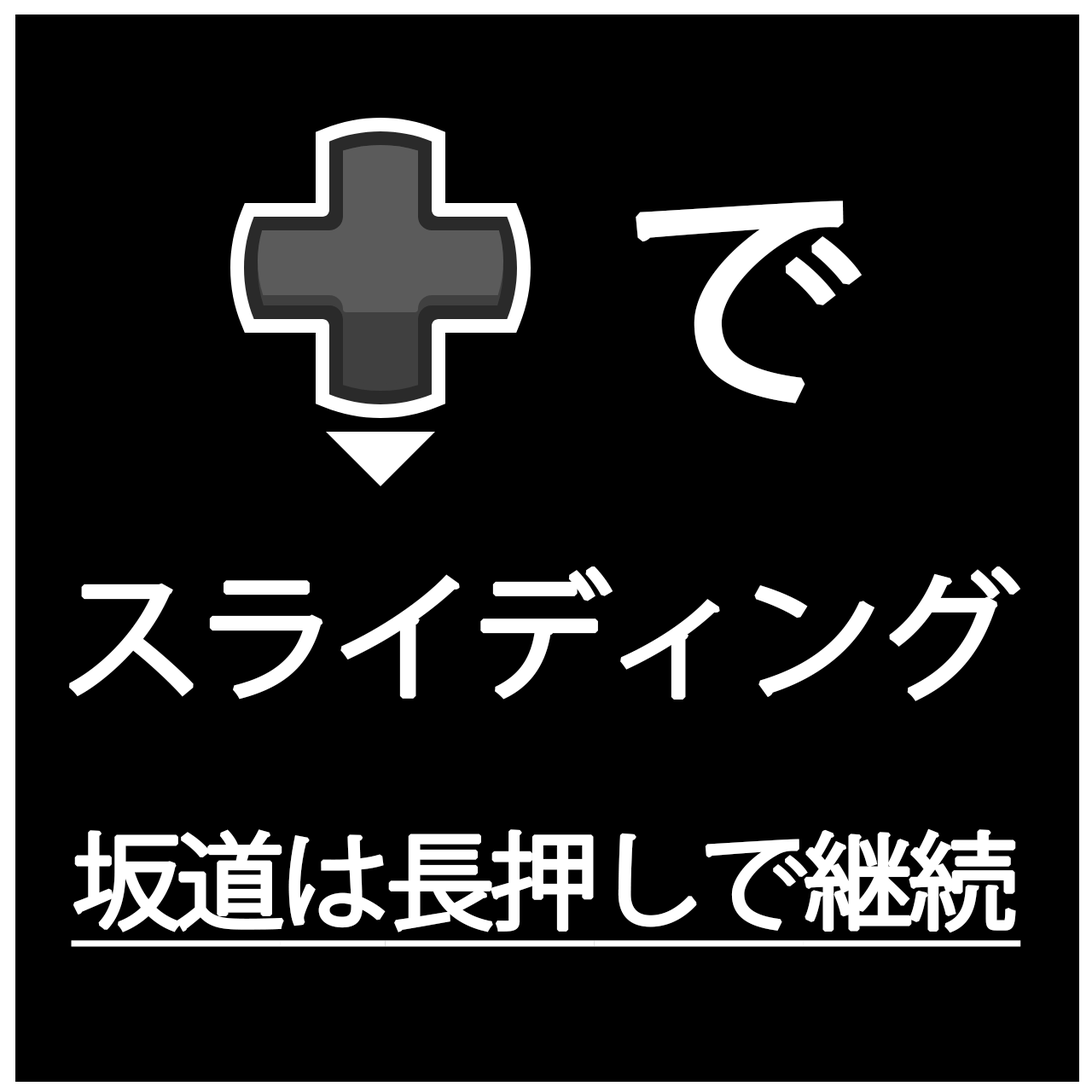
<style>
.page{position:relative;width:1092px;height:1092px;background:#000000}
.page>*{position:absolute;margin:0}
.t1{font:232.2px "KozGoPr6N-Regular";letter-spacing:-0.07em;color:#ffffff;font-weight:bold;scale:1.04 1}
.t2{font:232.2px "Bauhaus93";letter-spacing:-0.07em;color:#ffffff;font-weight:bold;scale:1.04 1}
.t3{font:136.5px "KozGoPr6N-Regular";letter-spacing:-0.07em;color:#ffffff;font-weight:bold;scale:1.04 1}
.t4{font:105.1px "KozGoPr6N-Regular";letter-spacing:-0.07em;color:#ffffff;font-weight:bold;text-decoration:underline;scale:1.04 1}
</style>
<div class="page">
<p class="t1" style="left:636px;top:200px;width:226px;height:204px"><span class="t2"> </span>で</p>
<p class="t3" style="left:69px;top:566px;width:952px;height:135px">スライディング</p>
<p class="t4" style="left:71px;top:828px;width:950px;height:119px">坂道は長押しで継続</p>
</div>
